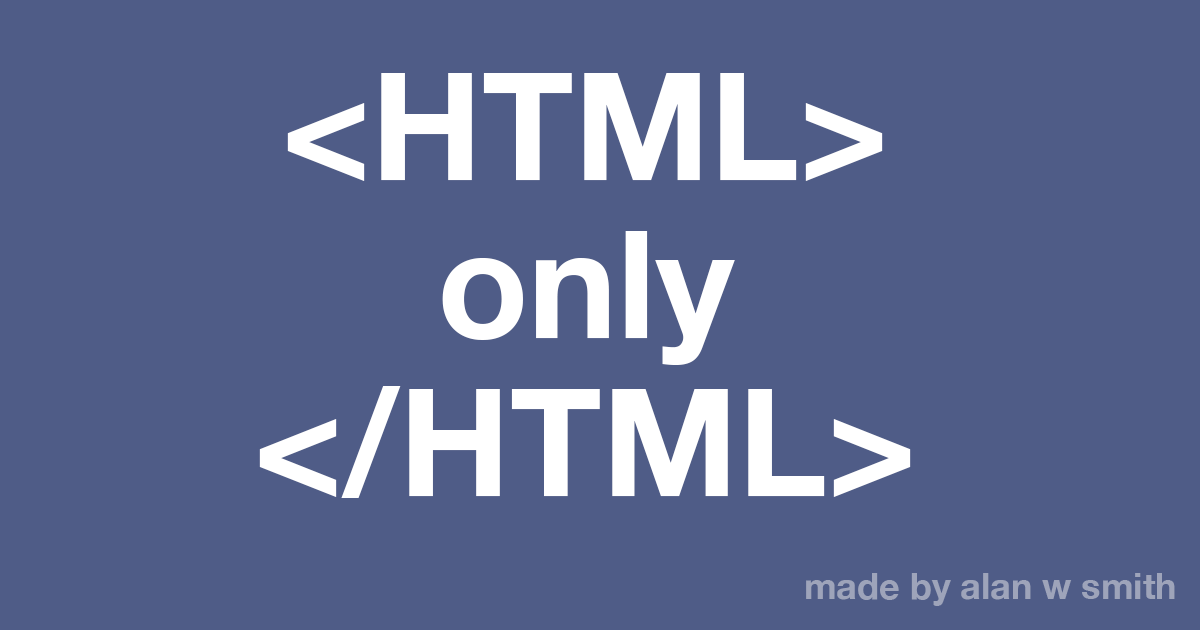
<style>
.page{position:relative;width:1200px;height:630px;background:#4f5c87}
.page>*{position:absolute;margin:0}
.t1{font:150px/158px "HelveticaNeue-Bold";color:#ffffff}
.t2{font:150px/144px "HelveticaNeue-Bold";color:#ffffff}
.t3{font:36px "HelveticaNeue-Bold";color:#9ea4ba}
</style>
<div class="page">
<p class="t1" style="left:259px;top:73px;width:652px;height:425px;text-align:center"><span class="t2">&lt;HTML&gt;<br></span>only<br>&lt;/HTML&gt;</p>
<p class="t3" style="left:806px;top:573px;width:369px;height:33px">made by alan w smith</p>
</div>
